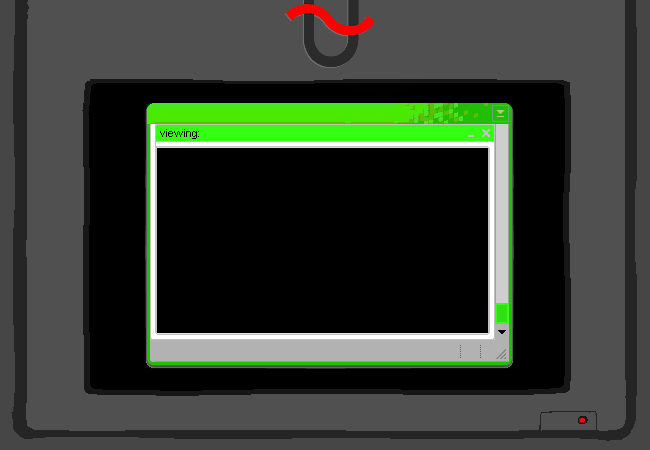
<style>
.page{position:relative;width:650px;height:450px;background:#000000}
.page>*{position:absolute;margin:0}
.t1{font:11px "ArialMT";color:#000000}
</style>
<div class="page">
<p class="t1" style="left:160px;top:129px;width:39px;height:10px">viewing:</p>
</div>
